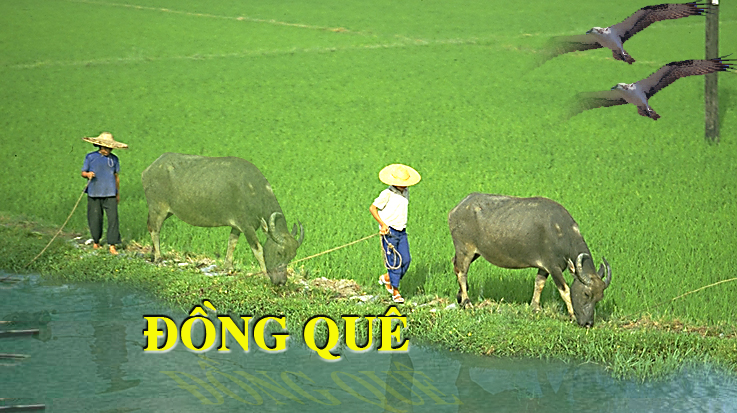
<style>
.page{position:relative;width:737px;height:413px}
.page>*{position:absolute;margin:0}
.t1{font:48px "VnTimeHBold";letter-spacing:-0.01em;color:#f6f908;font-weight:bold}
.t2{font:79.1px "VnTimeHBold";letter-spacing:-0.01em;color:#71965d;font-weight:bold;scale:0.61 1}
</style>
<div class="page">
<p class="t1" style="left:144px;top:301px;width:265px;height:59px">®ång quª</p>
<p class="t2" style="left:159px;top:354px;width:305px;height:59px">®ång quª</p>
</div>
